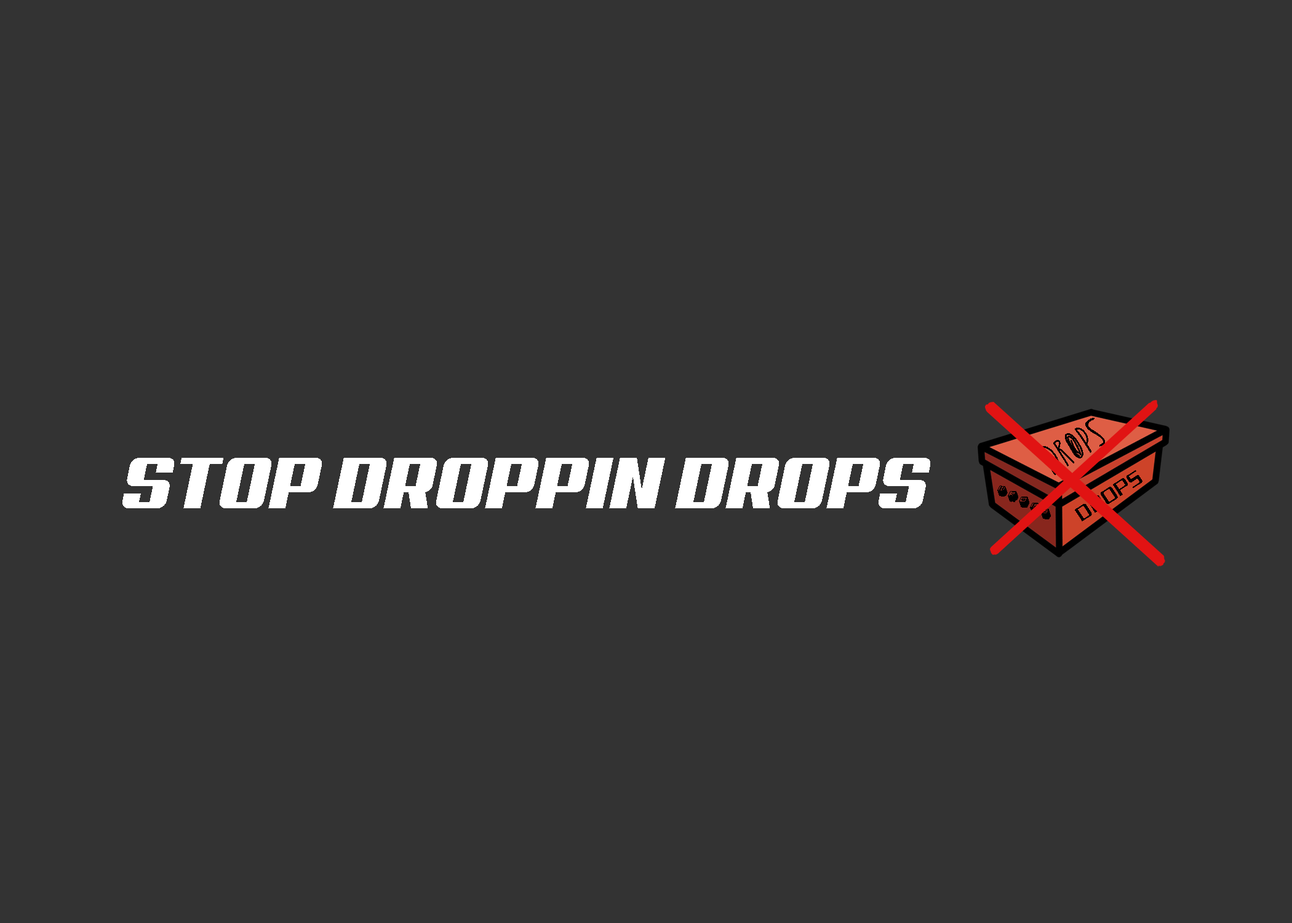
<style>
.page{position:relative;width:1292px;height:923px;background:#333333}
.page>*{position:absolute;margin:0}
.t1{font:31.6px "RetroElectro";color:#000000}
.t2{font:73.3px "Aero";color:#ffffff}
.t3{font:20.4px "Dungeon-Regular";color:#000000}
.t4{font:14.1px "Nipponblocks";color:#000000}
</style>
<div class="page">
<p class="t1" style="left:1037px;top:418px;width:68px;height:57px;rotate:-32deg">DROps</p>
<p class="t2" style="left:122px;top:458px;width:808px;height:50px">STOP DROPPIN DROPS</p>
<p class="t3" style="left:1075px;top:470px;width:68px;height:51px;rotate:-33deg">DROPS</p>
<p class="t4" style="left:997px;top:485px;width:54px;height:34px;rotate:27deg">DROPS</p>
</div>
